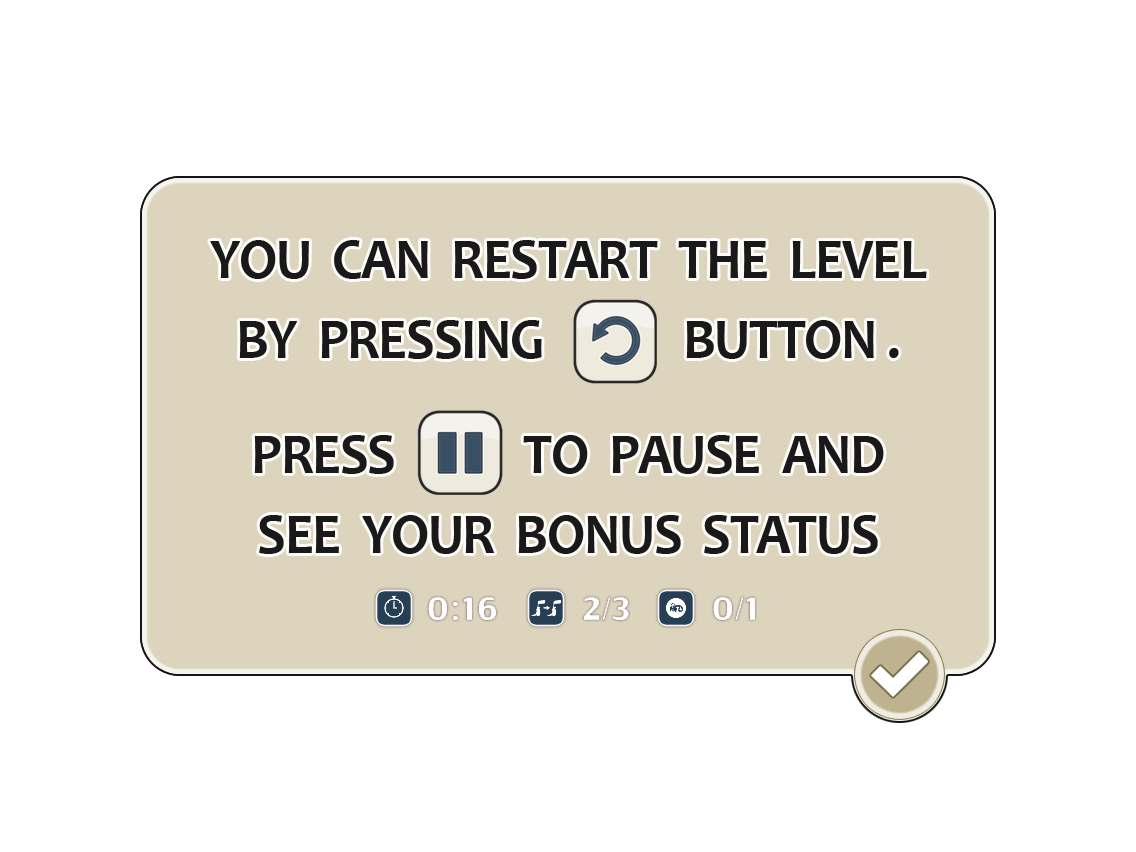
<style>
.page{position:relative;width:1136px;height:852px;background:#ffffff}
.page>*{position:absolute;margin:0}
.t1{font:57.8px/80px "Candara-Bold";letter-spacing:-0.02em;color:#191919;scale:0.94 1}
</style>
<div class="page">
<p class="t1" style="left:210px;top:240px;width:717px;height:119px;text-align:center">YOU  CAN  RESTART  THE  LEVEL<br>BY  PRESSING             BUTTON .</p>
<p class="t1" style="left:254px;top:435px;width:630px;height:119px;text-align:center">PRESS            TO  PAUSE  AND<br>SEE  YOUR  BONUS  STATUS</p>
</div>
